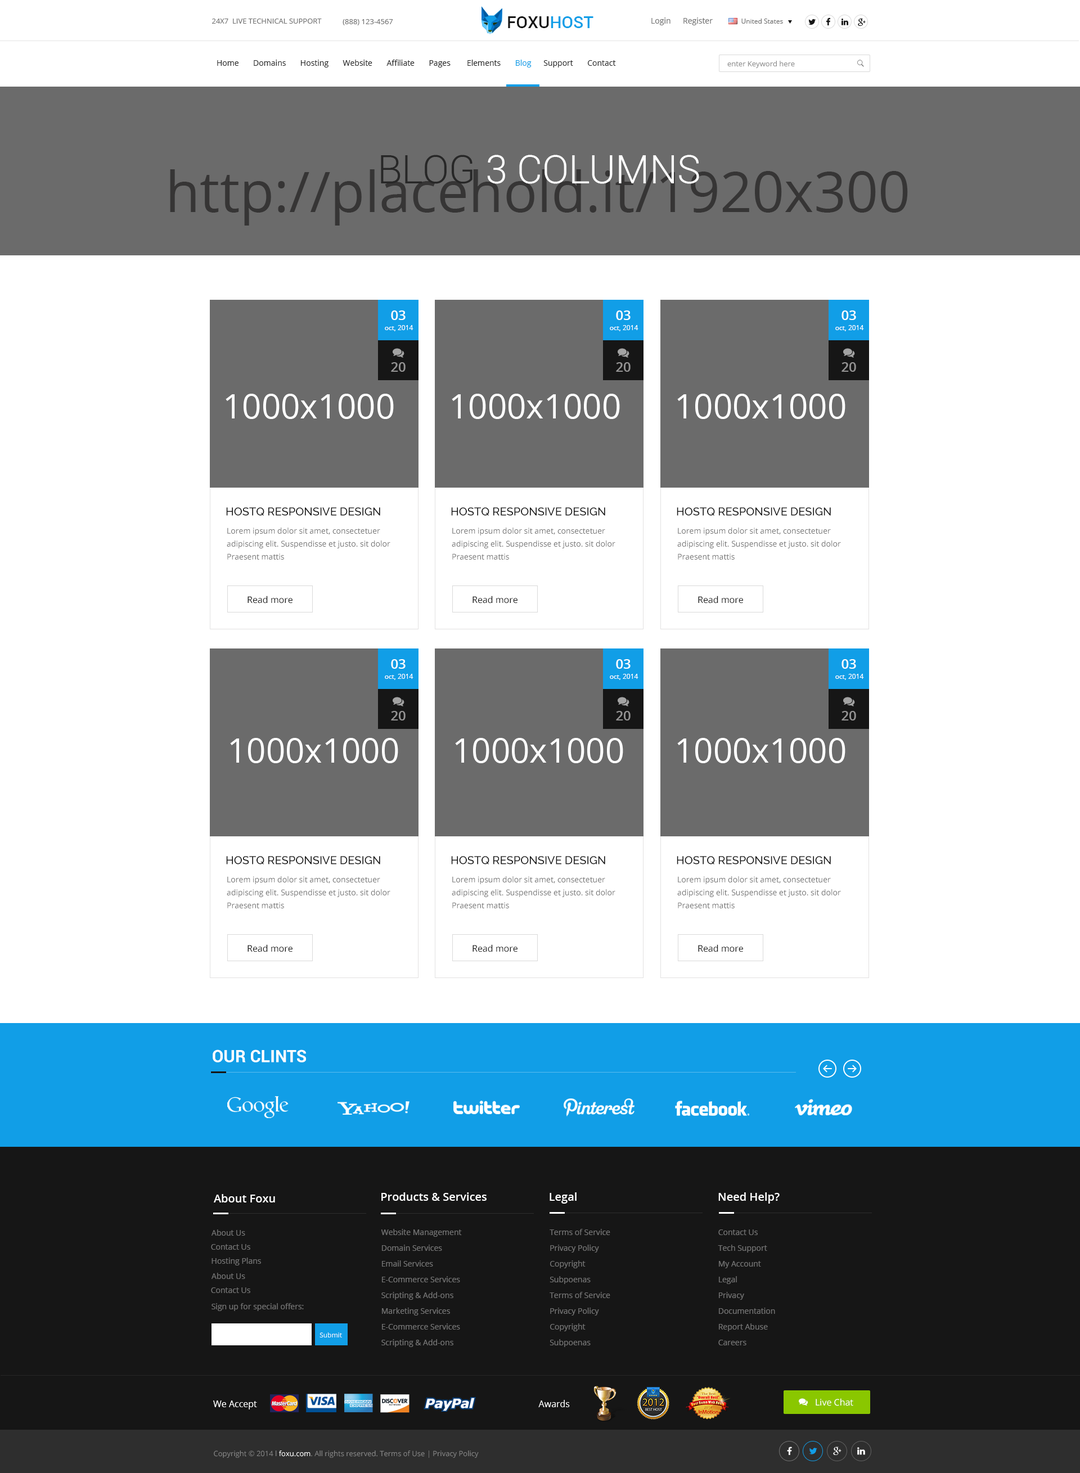
<style>
.page{position:relative;width:1080px;height:1473px;background:#ffffff}
.page>*{position:absolute;margin:0}
.t1{font:16.9px "Roboto-Medium";color:#161616;text-transform:uppercase}
.t2{font:16.9px "Roboto-Medium";color:#119ee7;text-transform:uppercase}
.t3{font:7.9px "OpenSans";color:#727272}
.t4{font:7.3px "OpenSans";color:#727272;text-transform:uppercase}
.t5{font:6.8px "OpenSans";color:#727272}
.t6{font:7.9px "OpenSans";color:#272727}
.t7{font:7.9px "OpenSans";color:#119ee7}
.t8{font:7.3px "OpenSans";color:#949494}
.t9{font:39.4px "Roboto-Light";color:#ffffff;text-transform:uppercase}
.t10{font:39.4px "Roboto-Light";color:#272727;text-transform:uppercase}
.t11{font:56.2px "OpenSans";color:#363535}
.t12{font:13.5px "OpenSans-Semibold";color:#ffffff;text-transform:uppercase}
.t13{font:6.8px "OpenSans";color:#ffffff}
.t14{font:13.5px "OpenSans-Semibold";color:#949393;text-transform:uppercase}
.t15{font:33.8px "OpenSans";color:#ffffff}
.t16{font:11.2px "Raleway-Medium";color:#161616;text-transform:uppercase}
.t17{font:7.9px/12.9px "OpenSans";color:#727272}
.t18{font:9px "OpenSans";color:#161616}
.t19{font:16.9px "Roboto-Bold";color:#ffffff;text-transform:uppercase}
.t20{font:11.2px "OpenSans-Semibold";color:#ffffff}
.t21{font:7.9px "OpenSans";color:#737373}
.t22{font:7.9px/15.7px "OpenSans";color:#737373}
.t23{font:6.7px "OpenSans";color:#ffffff}
.t24{font:9px "OpenSans";color:#ffffff}
.t25{font:7.3px "OpenSans";color:#858585}
.t26{font:7.3px "OpenSans";color:#ffffff}
</style>
<div class="page">
<p class="t1" style="left:508px;top:16px;width:85px;height:12px">foxu<span class="t2">host</span></p>
<p class="t3" style="left:651px;top:17px;width:19px;height:8px">Login</p>
<p class="t3" style="left:683px;top:17px;width:30px;height:8px">Register</p>
<p class="t4" style="left:212px;top:19px;width:110px;height:5px">24x7  live Technical Support</p>
<p class="t4" style="left:343px;top:19px;width:50px;height:6px">(888) 123-4567</p>
<p class="t5" style="left:741px;top:19px;width:42px;height:5px">United States</p>
<p class="t6" style="left:217px;top:60px;width:399px;height:8px">Home       Domains       Hosting       Website       Affiliate       Pages        Elements       <span class="t7">Blog</span>      Support       Contact</p>
<p class="t8" style="left:727px;top:61px;width:68px;height:7px">enter Keyword here</p>
<p class="t9" style="left:381px;top:155px;width:318px;height:29px"><span class="t10">Blog</span> 3 Columns</p>
<p class="t11" style="left:170px;top:169px;width:738px;height:57px">http://placehold.it/1920x300</p>
<p class="t12" style="left:391px;top:310px;width:15px;height:10px">03</p>
<p class="t12" style="left:616px;top:310px;width:15px;height:10px">03</p>
<p class="t12" style="left:842px;top:310px;width:14px;height:10px">03</p>
<p class="t13" style="left:385px;top:325px;width:28px;height:6px">oct, 2014</p>
<p class="t13" style="left:610px;top:325px;width:28px;height:6px">oct, 2014</p>
<p class="t13" style="left:835px;top:325px;width:29px;height:6px">oct, 2014</p>
<p class="t14" style="left:391px;top:362px;width:15px;height:10px">20</p>
<p class="t14" style="left:616px;top:362px;width:15px;height:10px">20</p>
<p class="t14" style="left:842px;top:362px;width:14px;height:10px">20</p>
<p class="t15" style="left:226px;top:394px;width:168px;height:25px">1000x1000</p>
<p class="t15" style="left:452px;top:394px;width:168px;height:25px">1000x1000</p>
<p class="t15" style="left:677px;top:394px;width:168px;height:25px">1000x1000</p>
<p class="t16" style="left:226px;top:507px;width:154px;height:9px">hostq responsive design</p>
<p class="t16" style="left:451px;top:507px;width:154px;height:9px">hostq responsive design</p>
<p class="t16" style="left:677px;top:507px;width:154px;height:9px">hostq responsive design</p>
<p class="t17" style="left:227px;top:528px;width:163px;height:32px">Lorem ipsum dolor sit amet, consectetuer adipiscing elit. Suspendisse et justo. sit dolor Praesent mattis</p>
<p class="t17" style="left:452px;top:528px;width:163px;height:32px">Lorem ipsum dolor sit amet, consectetuer adipiscing elit. Suspendisse et justo. sit dolor Praesent mattis</p>
<p class="t17" style="left:677px;top:528px;width:164px;height:32px">Lorem ipsum dolor sit amet, consectetuer adipiscing elit. Suspendisse et justo. sit dolor Praesent mattis</p>
<p class="t18" style="left:248px;top:596px;width:44px;height:8px">Read more</p>
<p class="t18" style="left:472px;top:596px;width:46px;height:8px">Read more</p>
<p class="t18" style="left:698px;top:596px;width:45px;height:8px">Read more</p>
<p class="t12" style="left:391px;top:659px;width:15px;height:10px">03</p>
<p class="t12" style="left:616px;top:659px;width:15px;height:10px">03</p>
<p class="t12" style="left:842px;top:659px;width:14px;height:10px">03</p>
<p class="t13" style="left:385px;top:674px;width:28px;height:6px">oct, 2014</p>
<p class="t13" style="left:610px;top:674px;width:28px;height:6px">oct, 2014</p>
<p class="t13" style="left:835px;top:674px;width:29px;height:6px">oct, 2014</p>
<p class="t14" style="left:391px;top:711px;width:15px;height:10px">20</p>
<p class="t14" style="left:616px;top:711px;width:15px;height:10px">20</p>
<p class="t14" style="left:842px;top:711px;width:14px;height:10px">20</p>
<p class="t15" style="left:230px;top:738px;width:168px;height:25px">1000x1000</p>
<p class="t15" style="left:455px;top:738px;width:168px;height:25px">1000x1000</p>
<p class="t15" style="left:677px;top:738px;width:168px;height:25px">1000x1000</p>
<p class="t16" style="left:226px;top:856px;width:154px;height:9px">hostq responsive design</p>
<p class="t16" style="left:451px;top:856px;width:154px;height:9px">hostq responsive design</p>
<p class="t16" style="left:677px;top:856px;width:154px;height:9px">hostq responsive design</p>
<p class="t17" style="left:227px;top:876px;width:163px;height:32px">Lorem ipsum dolor sit amet, consectetuer adipiscing elit. Suspendisse et justo. sit dolor Praesent mattis</p>
<p class="t17" style="left:452px;top:876px;width:163px;height:32px">Lorem ipsum dolor sit amet, consectetuer adipiscing elit. Suspendisse et justo. sit dolor Praesent mattis</p>
<p class="t17" style="left:677px;top:876px;width:164px;height:32px">Lorem ipsum dolor sit amet, consectetuer adipiscing elit. Suspendisse et justo. sit dolor Praesent mattis</p>
<p class="t18" style="left:248px;top:944px;width:44px;height:8px">Read more</p>
<p class="t18" style="left:472px;top:944px;width:46px;height:8px">Read more</p>
<p class="t18" style="left:698px;top:944px;width:45px;height:8px">Read more</p>
<p class="t19" style="left:213px;top:1050px;width:93px;height:13px">Our Clints</p>
<p class="t20" style="left:381px;top:1192px;width:106px;height:9px">Products &amp; Services</p>
<p class="t20" style="left:550px;top:1192px;width:27px;height:12px">Legal</p>
<p class="t20" style="left:718px;top:1192px;width:62px;height:12px">Need Help?</p>
<p class="t20" style="left:214px;top:1194px;width:61px;height:9px">About Foxu</p>
<p class="t21" style="left:212px;top:1230px;width:33px;height:6px">About Us</p>
<p class="t22" style="left:381px;top:1229px;width:81px;height:118px">Website Management<br>    Domain Services<br>    Email Services<br>    E-Commerce Services<br>    Scripting &amp; Add-ons<br>    Marketing Services<br>    E-Commerce Services<br>    Scripting &amp; Add-ons</p>
<p class="t22" style="left:550px;top:1229px;width:60px;height:118px">Terms of Service<br>Privacy Policy<br>Copyright<br>Subpoenas<br>Terms of Service<br>Privacy Policy<br>Copyright<br>Subpoenas</p>
<p class="t22" style="left:718px;top:1230px;width:57px;height:116px">Contact Us<br>    Tech Support<br>    My Account<br>    Legal<br>    Privacy<br>    Documentation<br>    Report Abuse<br>    Careers</p>
<p class="t21" style="left:211px;top:1244px;width:39px;height:6px">Contact Us</p>
<p class="t21" style="left:212px;top:1258px;width:49px;height:8px">Hosting Plans</p>
<p class="t21" style="left:212px;top:1273px;width:33px;height:6px">About Us</p>
<p class="t21" style="left:211px;top:1288px;width:39px;height:5px">Contact Us</p>
<p class="t21" style="left:212px;top:1303px;width:92px;height:8px">Sign up for special offers:</p>
<p class="t23" style="left:320px;top:1333px;width:22px;height:5px">Submit</p>
<p class="t24" style="left:213px;top:1401px;width:44px;height:9px">We Accept</p>
<p class="t24" style="left:538px;top:1400px;width:32px;height:7px">Awards</p>
<p class="t24" style="left:816px;top:1398px;width:37px;height:8px">Live Chat</p>
<p class="t25" style="left:214px;top:1451px;width:265px;height:7px">Copyright © 2014 l <span class="t26">foxu.com</span>. All rights reserved. Terms of Use | Privacy Policy</p>
</div>
